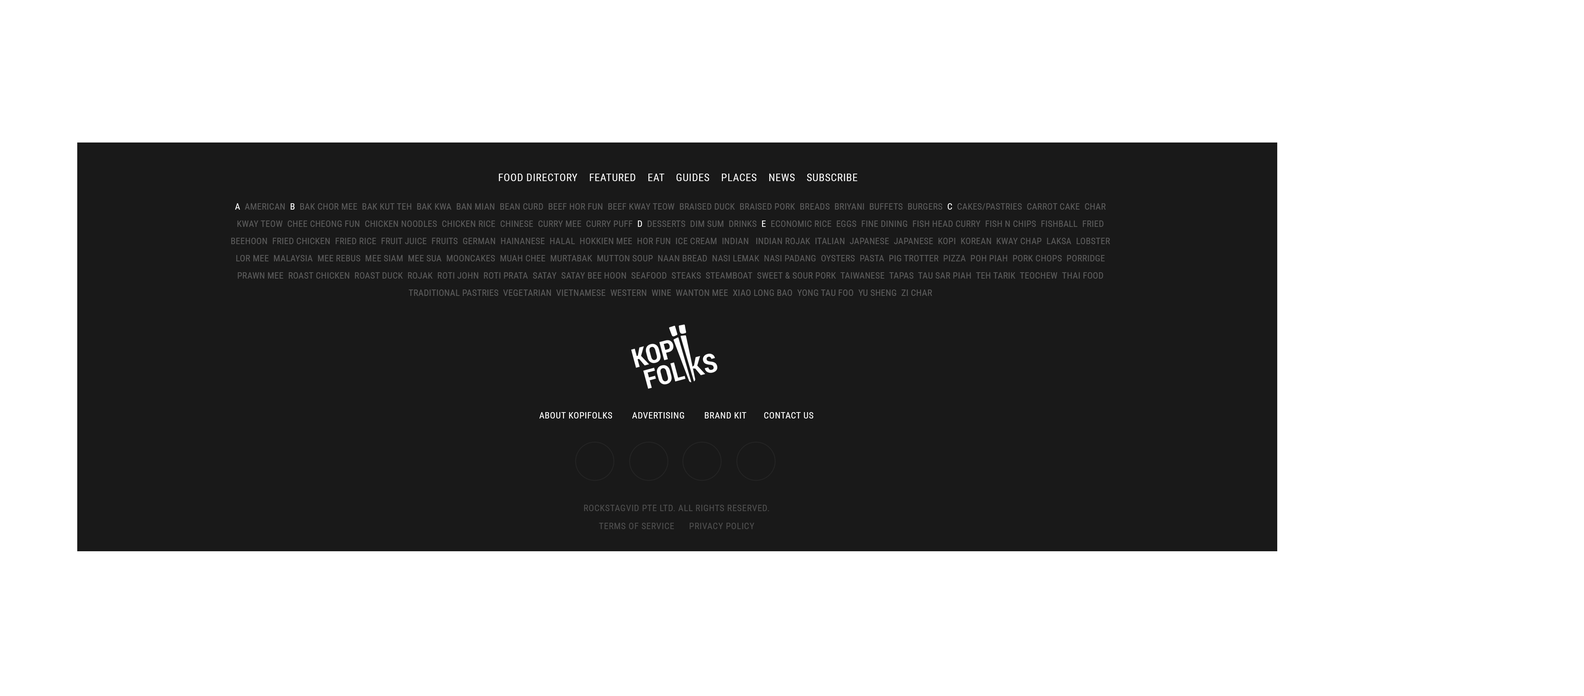
<style>
.page{position:relative;width:1584px;height:696px;background:#ffffff}
.page>*{position:absolute;margin:0}
.t1{font:10.5px "RobotoCondensed-Regular";letter-spacing:0.04em;color:#ffffff;text-transform:uppercase}
.t2{font:9px/17.2px "RobotoCondensed-Regular";letter-spacing:0.02em;color:#5b5b5b;text-transform:uppercase}
.t3{font:9px/17.2px "RobotoCondensed-Regular";letter-spacing:0.02em;color:#ffffff;text-transform:uppercase}
.t4{font:9px "RobotoCondensed-Regular";letter-spacing:0.04em;color:#ffffff;text-transform:uppercase}
.t5{font:9px/18px "RobotoCondensed-Regular";letter-spacing:0.04em;color:#4e4e4e;text-transform:uppercase}
</style>
<div class="page">
<p class="t1" style="left:499px;top:174px;width:358px;height:7px">FOOD DIRECTORY    FEATURED    EAT    GUIDES    PLACES    NEWS    SUBSCRIBE</p>
<p class="t2" style="left:231px;top:203px;width:879px;height:93px;text-align:center"><span class="t3">A </span> American  <span class="t3">B</span>  Bak Chor Mee  Bak Kut Teh  Bak Kwa  Ban Mian  Bean Curd  Beef Hor Fun  Beef Kway Teow  Braised Duck  Braised Pork  Breads  Briyani  Buffets  Burgers  <span class="t3">C </span> Cakes/Pastries  Carrot Cake  Char Kway Teow  Chee Cheong Fun  Chicken Noodles  Chicken Rice  Chinese  Curry Mee  Curry Puff  <span class="t3">D</span>  Desserts  Dim Sum  Drinks  <span class="t3">E</span>  Economic Rice  Eggs  Fine Dining  Fish Head Curry  Fish n Chips  Fishball  Fried Beehoon  Fried Chicken  Fried Rice  Fruit Juice  Fruits  German  Hainanese  Halal  Hokkien Mee  Hor Fun  Ice Cream  Indian   Indian Rojak  Italian  Japanese  Japanese  Kopi  Korean  Kway Chap  Laksa  Lobster  Lor Mee  Malaysia  Mee Rebus  Mee Siam  Mee Sua  Mooncakes  Muah Chee  Murtabak  Mutton Soup  Naan Bread  Nasi Lemak  Nasi Padang  Oysters  Pasta  Pig Trotter  Pizza  Poh Piah  Pork Chops  Porridge  Prawn Mee  Roast Chicken  Roast Duck  Rojak  Roti John  Roti Prata  Satay  Satay Bee Hoon  Seafood  Steaks  Steamboat  Sweet &amp; Sour Pork  Taiwanese  Tapas  Tau Sar Piah  Teh Tarik  Teochew  Thai Food  Traditional Pastries  Vegetarian  Vietnamese  Western  Wine  Wanton Mee  Xiao Long Bao  Yong Tau Foo  Yu Sheng  Zi Char</p>
<p class="t4" style="left:539px;top:412px;width:274px;height:6px">About KOPIFOLKS        Advertising        Brand Kit       Contact Us</p>
<p class="t5" style="left:584px;top:505px;width:185px;height:24px;text-align:center">ROCKSTAGVID Pte Ltd. All Rights Reserved.  <br>Terms of Service      Privacy Policy</p>
</div>
